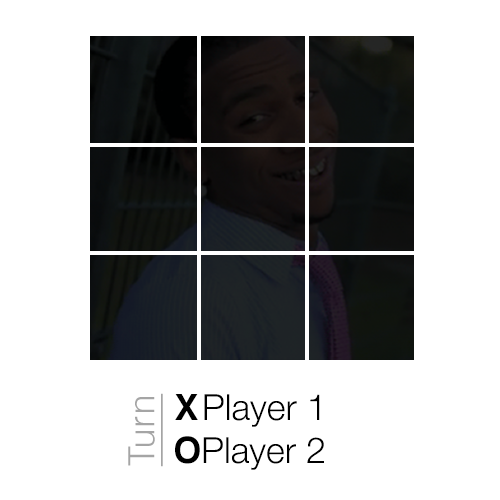
<style>
.page{position:relative;width:500px;height:500px;background:#ffffff}
.page>*{position:absolute;margin:0}
.t1{font:36px "Helvetica-Light";letter-spacing:0.02em;color:#a5a5a5;text-decoration:underline}
.t2{font:36px "HelveticaNeue-Light";color:#000000}
.t3{font:36px "Helvetica-Bold";letter-spacing:0.1em;color:#000000;scale:0.82 1}
.t4{font:36px "Helvetica-Bold";letter-spacing:0.1em;color:#000000}
.t5{font:36px "Helvetica-Bold";color:#000000}
</style>
<div class="page">
<p class="t1" style="left:128px;top:393px;width:35px;height:74px;rotate:-90deg">Turn</p>
<p class="t2" style="left:175px;top:394px;width:149px;height:76px"><span class="t3"> </span><span class="t4">X</span>Player 1<br><span class="t5"> O</span>Player 2</p>
</div>
